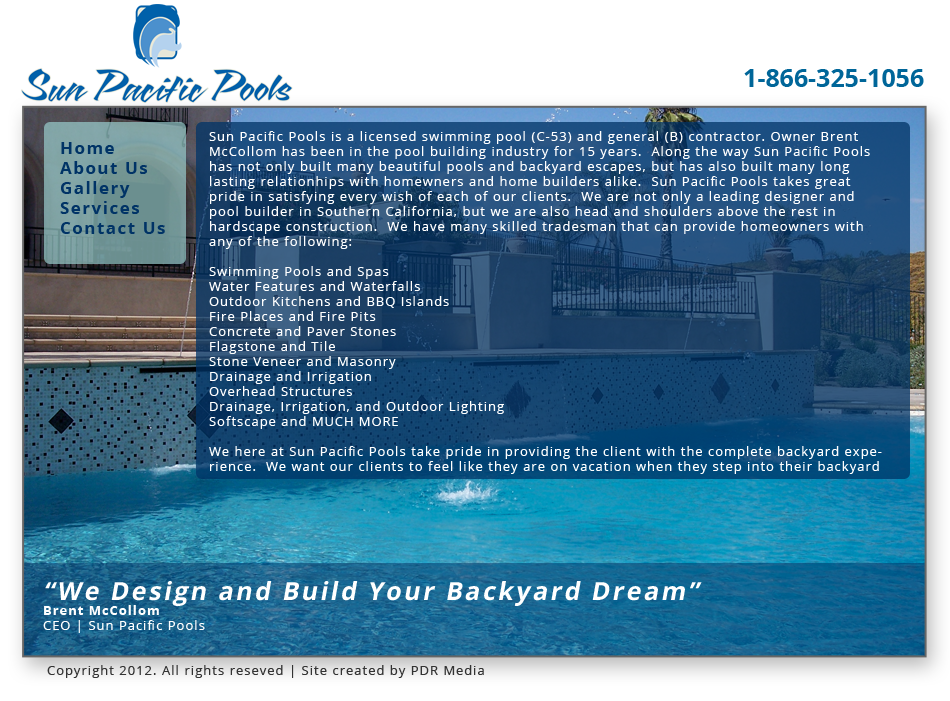
<style>
.page{position:relative;width:950px;height:701px}
.page>*{position:absolute;margin:0}
.t1{font:25px "OpenSans-Bold";color:#006699}
.t2{font:12.5px "OpenSans";letter-spacing:0.1em;color:#ffffff}
.t3{font:16.7px "OpenSans-Bold";letter-spacing:0.1em;color:#003366}
.t4{font:25px "OpenSans-Bold";letter-spacing:0.1em;color:#ffffff;font-style:italic}
.t5{font:12.5px "OpenSans-Bold";letter-spacing:0.1em;color:#ffffff}
.t6{font:12.5px "OpenSans";letter-spacing:0.1em;color:#333333}
</style>
<div class="page">
<p class="t1" style="left:744px;top:69px;width:180px;height:18px">1-866-325-1056</p>
<p class="t2" style="left:209px;top:131px;width:673px;height:343px">Sun Pacific Pools is a licensed swimming pool (C-53) and general (B) contractor. Owner Brent <br>McCollom has been in the pool building industry for 15 years.  Along the way Sun Pacific Pools has not only built many beautiful pools and backyard escapes, but has also built many long lasting relationhips with homewners and home builders alike.  Sun Pacific Pools takes great pride in satisfying every wish of each of our clients.  We are not only a leading designer and pool builder in Southern California, but we are also head and shoulders above the rest in <br>hardscape construction.  We have many skilled tradesman that can provide homeowners with any of the following:<br><br>Swimming Pools and Spas<br>Water Features and Waterfalls<br>Outdoor Kitchens and BBQ Islands<br>Fire Places and Fire Pits<br>Concrete and Paver Stones<br>Flagstone and Tile<br>Stone Veneer and Masonry<br>Drainage and Irrigation<br>Overhead Structures<br>Drainage, Irrigation, and Outdoor Lighting<br>Softscape and MUCH MORE<br><br>We here at Sun Pacific Pools take pride in providing the client with the complete backyard experience.  We want our clients to feel like they are on vacation when they step into their backyard oasis.</p>
<p class="t3" style="left:60px;top:142px;width:105px;height:92px">Home<br>About Us<br>Gallery<br>Services<br>Contact Us</p>
<p class="t4" style="left:43px;top:581px;width:659px;height:52px">“We Design and Build Your Backyard Dream”<br><span class="t5">Brent McCollom<br></span><span class="t2">CEO | Sun Pacific Pools</span></p>
<p class="t6" style="left:47px;top:665px;width:437px;height:13px">Copyright 2012. All rights reseved | Site created by PDR Media</p>
</div>
